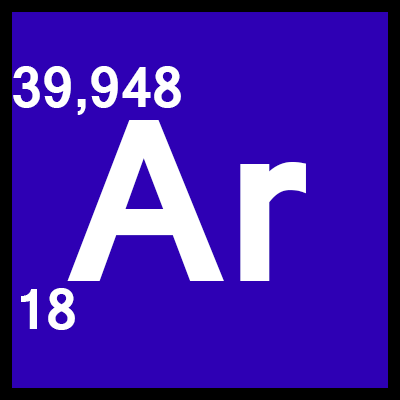
<style>
.page{position:relative;width:400px;height:400px;background:#2e00b4}
.page>*{position:absolute;margin:0}
.t1{font:62.5px "Latha-Bold";color:#ffffff}
.t2{font:250px "Latha-Bold";color:#ffffff}
</style>
<div class="page">
<p class="t1" style="left:13px;top:66px;width:168px;height:49px">39,948</p>
<p class="t2" style="left:67px;top:120px;width:239px;height:161px">Ar</p>
<p class="t1" style="left:21px;top:288px;width:54px;height:42px">18</p>
</div>
